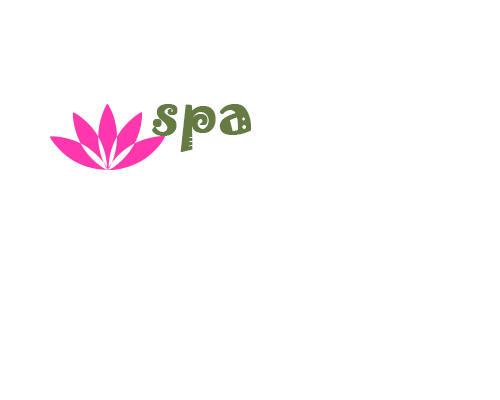
<style>
.page{position:relative;width:500px;height:400px;background:#ffffff}
.page>*{position:absolute;margin:0}
.t1{font:59.8px "Jokerman-Regular";color:#667b43;font-weight:bold}
</style>
<div class="page">
<p class="t1" style="left:152px;top:104px;width:99px;height:48px">spa</p>
</div>
